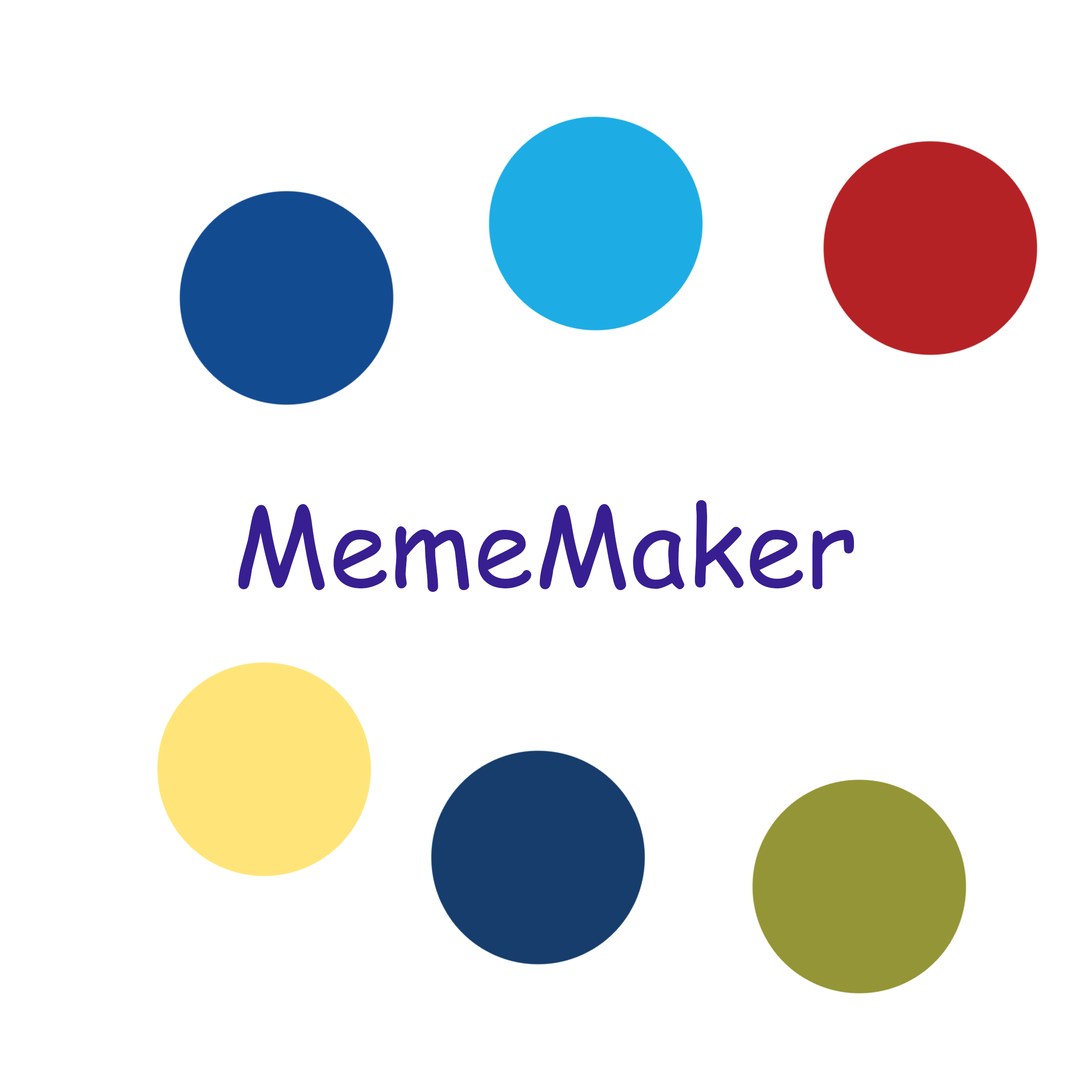
<style>
.page{position:relative;width:1092px;height:1092px;background:#ffffff}
.page>*{position:absolute;margin:0}
.t1{font:109.4px "ComicSansMS";color:#371f91}
</style>
<div class="page">
<p class="t1" style="left:238px;top:500px;width:616px;height:92px">MemeMaker</p>
</div>
